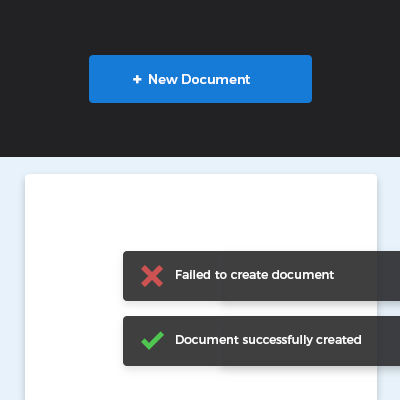
<style>
.page{position:relative;width:400px;height:400px;background:#222224}
.page>*{position:absolute;margin:0}
.t1{font:17px "Montserrat-Black";color:#ffffff}
.t2{font:13px "Montserrat-Medium";color:#ffffff}
.t3{font:12px "Montserrat-Regular";color:#ffffff}
</style>
<div class="page">
<p class="t1" style="left:133px;top:75px;width:9px;height:9px">+</p>
<p class="t2" style="left:149px;top:74px;width:101px;height:10px">New Document</p>
<p class="t3" style="left:176px;top:270px;width:158px;height:9px">Failed to create document</p>
<p class="t3" style="left:176px;top:335px;width:185px;height:11px">Document successfully created</p>
</div>
